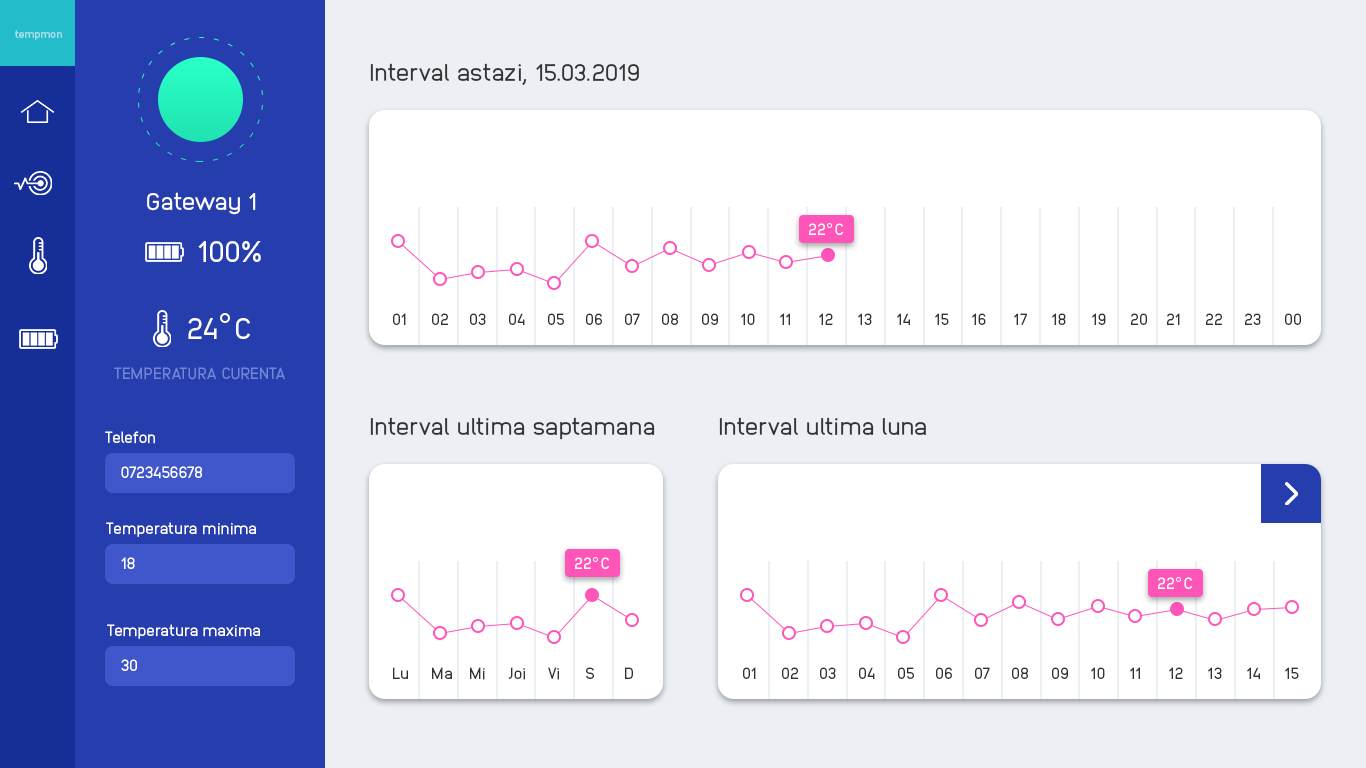
<style>
.page{position:relative;width:1366px;height:768px;background:#ffffff}
.page>*{position:absolute;margin:0}
.t1{font:10.7px "Anodina-ExtraBold";color:#a0deeb}
.t2{font:24px "Anodina-Regular";color:#333333}
.t3{font:24px "Anodina-Regular";color:#ffffff}
.t4{font:16px "Anodina-Regular";color:#ffffff}
.t5{font:30px "Anodina-Regular";color:#ffffff}
.t6{font:16px "Anodina-Regular";color:#333333}
.t7{font:16px "Anodina-Regular";color:#7186d5}
</style>
<div class="page">
<p class="t1" style="left:15px;top:30px;width:47px;height:10px">tempmon</p>
<p class="t2" style="left:370px;top:63px;width:269px;height:23px">Interval astazi, 15.03.2019</p>
<p class="t3" style="left:147px;top:192px;width:109px;height:23px">Gateway 1</p>
<p class="t4" style="left:809px;top:223px;width:35px;height:12px">22  C</p>
<p class="t5" style="left:198px;top:241px;width:63px;height:21px">100%</p>
<p class="t5" style="left:188px;top:318px;width:62px;height:21px">24  C</p>
<p class="t6" style="left:393px;top:313px;width:13px;height:12px">01</p>
<p class="t6" style="left:432px;top:313px;width:16px;height:12px">02</p>
<p class="t6" style="left:470px;top:313px;width:16px;height:12px">03</p>
<p class="t6" style="left:509px;top:313px;width:16px;height:13px">04</p>
<p class="t6" style="left:548px;top:313px;width:16px;height:12px">05</p>
<p class="t6" style="left:586px;top:313px;width:16px;height:12px">06</p>
<p class="t6" style="left:625px;top:313px;width:15px;height:12px">07</p>
<p class="t6" style="left:662px;top:313px;width:16px;height:12px">08</p>
<p class="t6" style="left:702px;top:313px;width:16px;height:12px">09</p>
<p class="t6" style="left:741px;top:313px;width:14px;height:12px">10</p>
<p class="t6" style="left:780px;top:313px;width:10px;height:12px">11</p>
<p class="t6" style="left:819px;top:313px;width:14px;height:12px">12</p>
<p class="t6" style="left:858px;top:313px;width:14px;height:12px">13</p>
<p class="t6" style="left:897px;top:313px;width:13px;height:13px">14</p>
<p class="t6" style="left:935px;top:313px;width:14px;height:12px">15</p>
<p class="t6" style="left:972px;top:313px;width:14px;height:12px">16</p>
<p class="t6" style="left:1014px;top:313px;width:13px;height:12px">17</p>
<p class="t6" style="left:1052px;top:313px;width:14px;height:12px">18</p>
<p class="t6" style="left:1092px;top:313px;width:14px;height:12px">19</p>
<p class="t6" style="left:1131px;top:313px;width:16px;height:12px">20</p>
<p class="t6" style="left:1167px;top:313px;width:13px;height:12px">21</p>
<p class="t6" style="left:1206px;top:313px;width:16px;height:12px">22</p>
<p class="t6" style="left:1245px;top:313px;width:16px;height:12px">23</p>
<p class="t6" style="left:1285px;top:313px;width:16px;height:12px">00</p>
<p class="t7" style="left:114px;top:367px;width:171px;height:13px">TEMPERATURA CURENTA</p>
<p class="t2" style="left:370px;top:417px;width:285px;height:23px">Interval ultima saptamana</p>
<p class="t2" style="left:719px;top:417px;width:207px;height:18px">Interval ultima luna</p>
<p class="t4" style="left:105px;top:431px;width:50px;height:13px">Telefon</p>
<p class="t4" style="left:121px;top:466px;width:81px;height:13px">0723456678</p>
<p class="t4" style="left:106px;top:522px;width:150px;height:15px">Temperatura minima</p>
<p class="t4" style="left:121px;top:557px;width:14px;height:12px">18</p>
<p class="t4" style="left:575px;top:557px;width:35px;height:12px">22  C</p>
<p class="t4" style="left:1158px;top:577px;width:35px;height:12px">22  C</p>
<p class="t4" style="left:107px;top:624px;width:153px;height:15px">Temperatura maxima</p>
<p class="t4" style="left:121px;top:659px;width:16px;height:12px">30</p>
<p class="t6" style="left:393px;top:667px;width:15px;height:12px">Lu</p>
<p class="t6" style="left:432px;top:667px;width:20px;height:12px">Ma</p>
<p class="t6" style="left:470px;top:667px;width:15px;height:13px">Mi</p>
<p class="t6" style="left:508px;top:667px;width:17px;height:13px">Joi</p>
<p class="t6" style="left:548px;top:667px;width:11px;height:13px">Vi</p>
<p class="t6" style="left:586px;top:667px;width:8px;height:12px">S</p>
<p class="t6" style="left:625px;top:667px;width:8px;height:12px">D</p>
<p class="t6" style="left:743px;top:667px;width:13px;height:12px">01</p>
<p class="t6" style="left:782px;top:667px;width:16px;height:12px">02</p>
<p class="t6" style="left:820px;top:667px;width:16px;height:12px">03</p>
<p class="t6" style="left:859px;top:667px;width:16px;height:13px">04</p>
<p class="t6" style="left:898px;top:667px;width:16px;height:12px">05</p>
<p class="t6" style="left:936px;top:667px;width:16px;height:12px">06</p>
<p class="t6" style="left:975px;top:667px;width:15px;height:12px">07</p>
<p class="t6" style="left:1012px;top:667px;width:16px;height:12px">08</p>
<p class="t6" style="left:1052px;top:667px;width:16px;height:12px">09</p>
<p class="t6" style="left:1091px;top:667px;width:14px;height:12px">10</p>
<p class="t6" style="left:1130px;top:667px;width:10px;height:12px">11</p>
<p class="t6" style="left:1169px;top:667px;width:14px;height:12px">12</p>
<p class="t6" style="left:1208px;top:667px;width:14px;height:12px">13</p>
<p class="t6" style="left:1247px;top:667px;width:13px;height:13px">14</p>
<p class="t6" style="left:1285px;top:667px;width:14px;height:12px">15</p>
</div>
